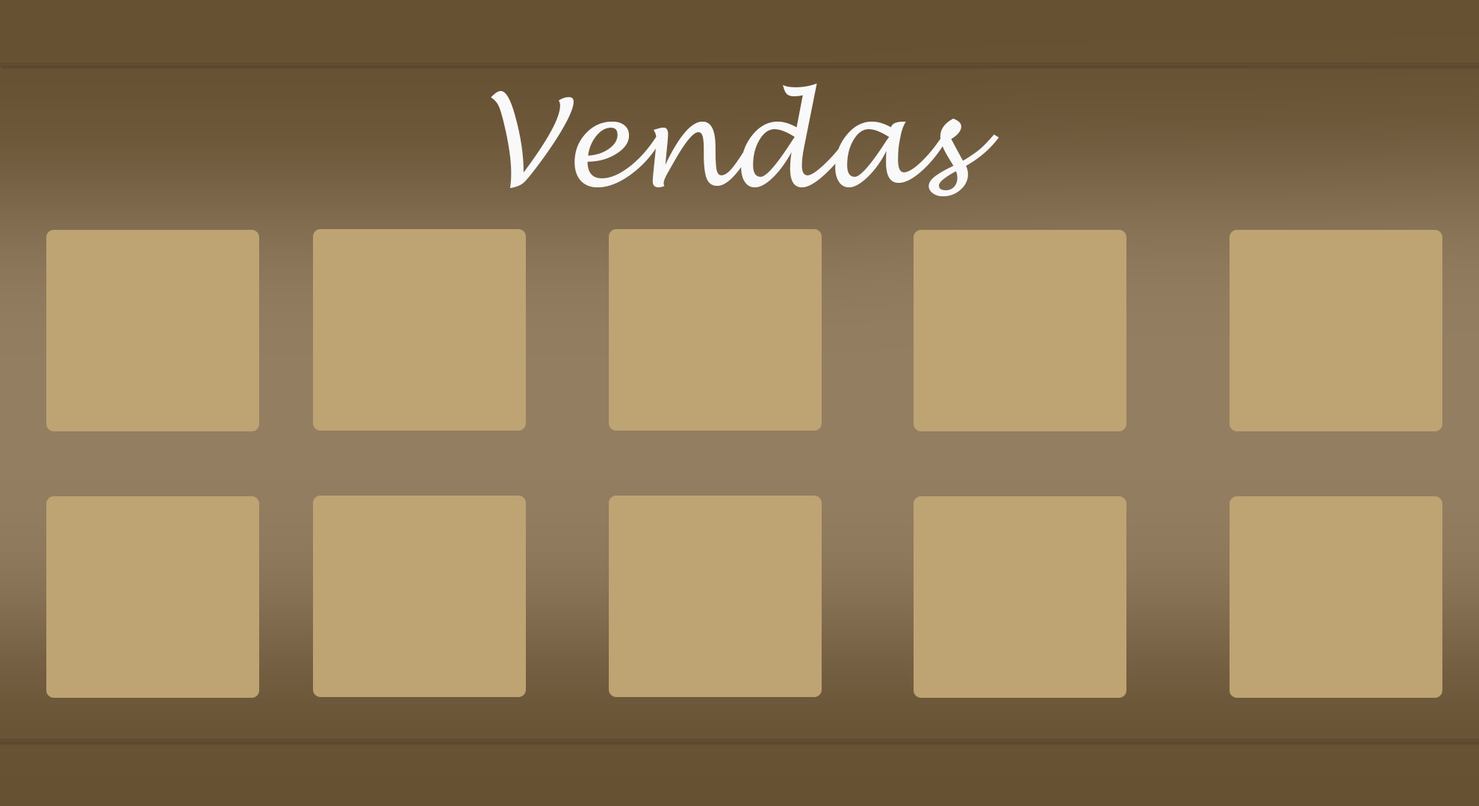
<style>
.page{position:relative;width:1479px;height:806px;background:#bea373}
.page>*{position:absolute;margin:0}
.t1{font:119.5px "LucidaHandwriting-Italic";color:#f9f9f9}
</style>
<div class="page">
<p class="t1" style="left:491px;top:84px;width:507px;height:112px">Vendas</p>
</div>
